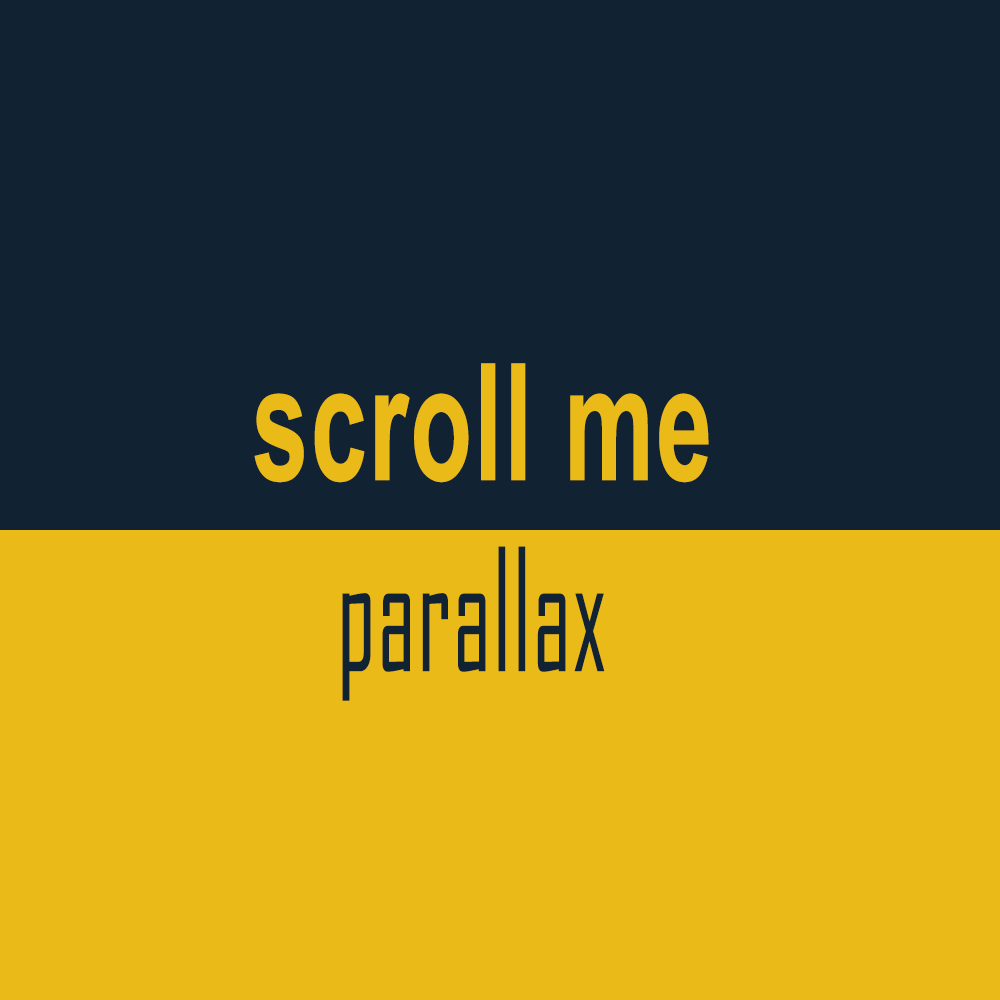
<style>
.page{position:relative;width:1000px;height:1000px;background:#112233}
.page>*{position:absolute;margin:0}
.t1{font:163px "Arial-BoldMT";letter-spacing:0.02em;color:#eaba19;scale:0.62 1}
.t2{font:163px "AgencyFB-Reg";letter-spacing:0.02em;color:#112233;scale:0.62 1}
</style>
<div class="page">
<p class="t1" style="left:254px;top:363px;width:455px;height:120px">scroll me</p>
<p class="t2" style="left:342px;top:546px;width:263px;height:155px">parallax</p>
</div>
